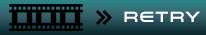
<style>
.page{position:relative;width:206px;height:35px}
.page>*{position:absolute;margin:0}
.t1{font:15px "Venera900";letter-spacing:0.075em;color:#ffffff;text-transform:uppercase}
</style>
<div class="page">
<p class="t1" style="left:124px;top:11px;width:76px;height:11px">retry</p>
</div>
